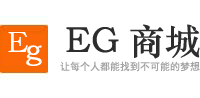
<style>
.page{position:relative;width:200px;height:98px;background:#ffffff}
.page>*{position:absolute;margin:0}
.t1{font:36px "STZhongsong";color:#2d2d2d}
.t2{font:30px "STZhongsong";color:#ffffff}
.t3{font:10px "SimHei";color:#a3a3a3}
</style>
<div class="page">
<p class="t1" style="left:66px;top:24px;width:134px;height:35px">EG商城</p>
<p class="t2" style="left:8px;top:32px;width:20px;height:20px">E</p>
<p class="t2" style="left:26px;top:45px;width:16px;height:21px">g</p>
<p class="t3" style="left:60px;top:61px;width:140px;height:11px">让每个人都能找到不可能的梦想</p>
</div>
